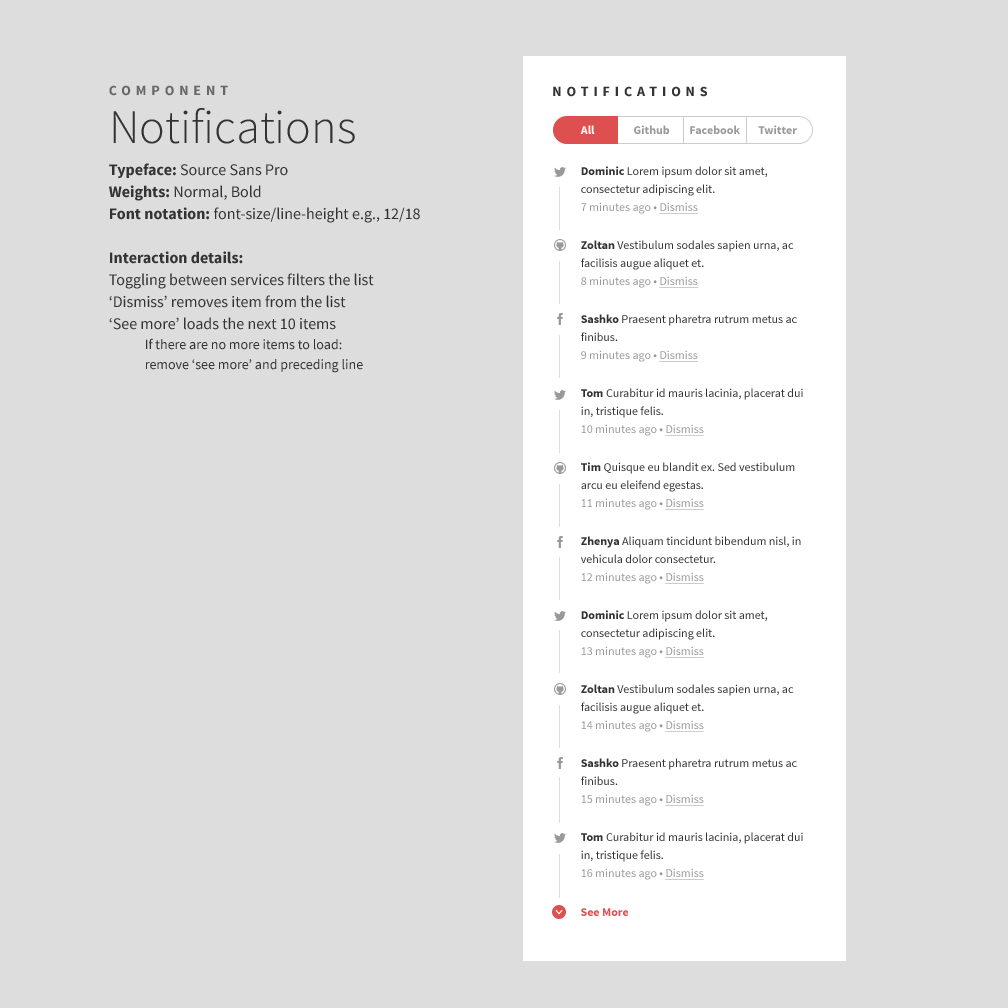
<style>
.page{position:relative;width:1008px;height:1008px;background:#dddddd}
.page>*{position:absolute;margin:0}
.t1{font:48px/48px "SourceSansPro-Light";color:#333333}
.t2{font:14px/40px "SourceSansPro-Bold";letter-spacing:0.35em;color:#666666;text-transform:uppercase}
.t3{font:14px "SourceSansPro-Bold";letter-spacing:0.35em;color:#333333;text-transform:uppercase}
.t4{font:12px "SourceSansPro-Bold";color:#ffffff}
.t5{font:12px "SourceSansPro-Bold";color:#999999}
.t6{font:16px/22px "SourceSansPro-Regular";color:#333333}
.t7{font:16px/22px "SourceSansPro-Bold";color:#333333}
.t8{font:14px/20px "SourceSansPro-Regular";color:#333333}
.t9{font:12px/18px "SourceSansPro-Regular";color:#333333}
.t10{font:12px/18px "SourceSansPro-Bold";color:#333333}
.t11{font:12px/18px "SourceSansPro-Regular";color:#999999}
.t12{font:12px/18px "SourceSansPro-Regular";color:#999999;text-decoration:underline}
</style>
<div class="page">
<p class="t1" style="left:109px;top:85px;width:246px;height:59px"><span class="t2">Component<br></span>Notifications</p>
<p class="t3" style="left:553px;top:86px;width:154px;height:11px">Notifications</p>
<p class="t4" style="left:580px;top:125px;width:15px;height:9px">All</p>
<p class="t5" style="left:634px;top:125px;width:36px;height:9px">Github</p>
<p class="t5" style="left:690px;top:125px;width:50px;height:9px">Facebook</p>
<p class="t5" style="left:758px;top:125px;width:39px;height:9px">Twitter</p>
<p class="t6" style="left:109px;top:163px;width:311px;height:210px"><span class="t7">Typeface:</span> Source Sans Pro<br><span class="t7">Weights:</span> Normal, Bold<br><span class="t7">Font notation: </span>font-size/line-height e.g., 12/18<br><br><span class="t7">Interaction details:<br></span>Toggling between services filters the list<br>‘Dismiss’ removes item from the list<br>‘See more’ loads the next 10 items<span class="t8"><br> If there are no more items to load:<br> remove ‘see more’ and preceding line</span></p>
<p class="t9" style="left:581px;top:166px;width:222px;height:714px"><span class="t10">Dominic </span>Lorem ipsum dolor sit amet, consectetur adipiscing elit.<br><span class="t11">7 minutes ago • </span><span class="t12">Dismiss<br></span><span class="t10">Zoltan </span>Vestibulum sodales sapien urna, ac facilisis augue aliquet et. <br><span class="t11">8 minutes ago • </span><span class="t12">Dismiss<br></span><span class="t10">Sashko </span>Praesent pharetra rutrum metus ac finibus.<br><span class="t11">9 minutes ago • </span><span class="t12">Dismiss<br></span><span class="t10">Tom </span>Curabitur id mauris lacinia, placerat dui in, tristique felis.<br><span class="t11">10 minutes ago • </span><span class="t12">Dismiss<br></span><span class="t10">Tim </span>Quisque eu blandit ex. Sed vestibulum arcu eu eleifend egestas.<br><span class="t11">11 minutes ago • </span><span class="t12">Dismiss<br></span><span class="t10">Zhenya </span>Aliquam tincidunt bibendum nisl, in vehicula dolor consectetur.<br><span class="t11">12 minutes ago • </span><span class="t12">Dismiss<br></span><span class="t10">Dominic </span>Lorem ipsum dolor sit amet, consectetur adipiscing elit.<br><span class="t11">13 minutes ago • </span><span class="t12">Dismiss<br></span><span class="t10">Zoltan </span>Vestibulum sodales sapien urna, ac facilisis augue aliquet et. <br><span class="t11">14 minutes ago • </span><span class="t12">Dismiss<br></span><span class="t10">Sashko </span>Praesent pharetra rutrum metus ac finibus.<br><span class="t11">15 minutes ago • </span><span class="t12">Dismiss<br></span><span class="t10">Tom </span>Curabitur id mauris lacinia, placerat dui in, tristique felis.<br><span class="t11">16 minutes ago • </span><span class="t12">Dismiss</span></p>
</div>
